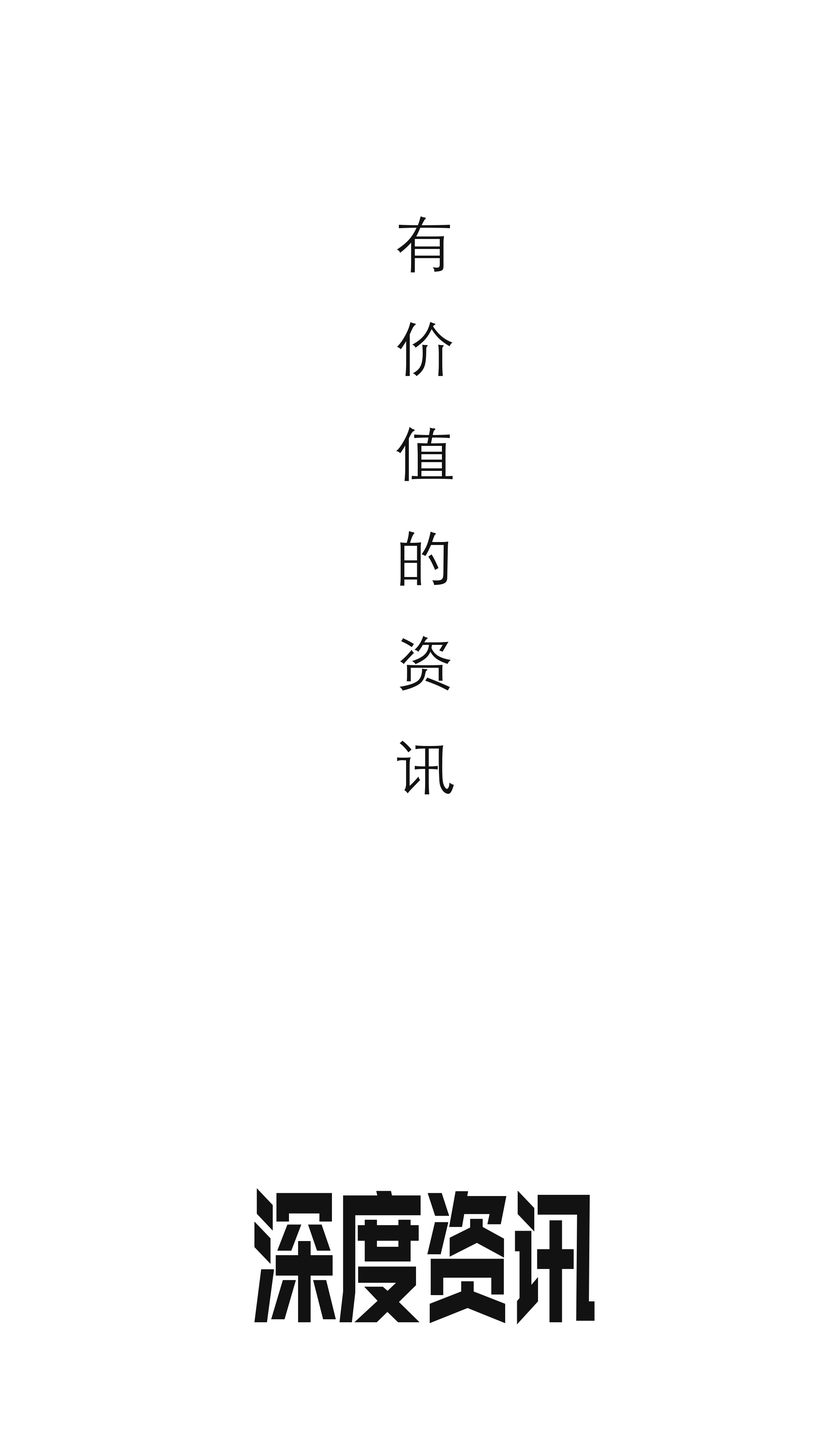
<style>
.page{position:relative;width:820px;height:1455px;background:#ffffff}
.page>*{position:absolute;margin:0}
.t1{font:59.8px "STXihei";color:#121212}
.t2{font:153.7px "BigruixianBlackGBV1.0";color:#121212;scale:0.56 1}
</style>
<div class="page">
<p class="t1" style="left:396px;top:216px;width:58px;height:579px">有<br>价<br>值<br>的<br>资<br>讯</p>
<p class="t2" style="left:254px;top:1188px;width:340px;height:137px">深度资讯</p>
</div>
